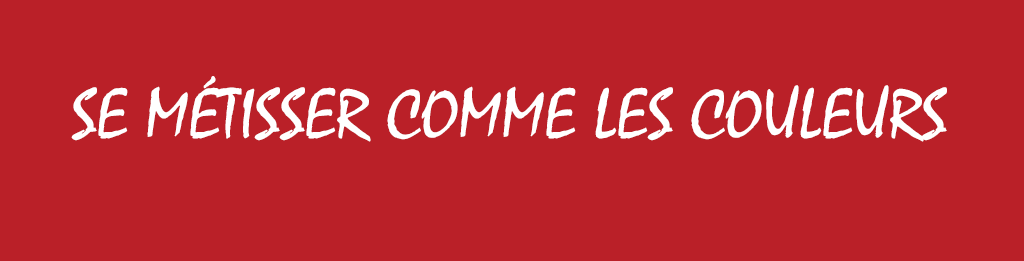
<style>
.page{position:relative;width:1024px;height:261px;background:#ba2028}
.page>*{position:absolute;margin:0}
.t1{font:72px "Mistral";color:#ffffff;text-transform:uppercase}
</style>
<div class="page">
<p class="t1" style="left:71px;top:76px;width:876px;height:66px">Se métisser comme les couleurs</p>
</div>
